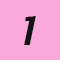
<style>
.page{position:relative;width:60px;height:60px;background:#f9aada}
.page>*{position:absolute;margin:0}
.t1{font:40px "LucidaSans-DemiItalic";color:#141314}
</style>
<div class="page">
<p class="t1" style="left:24px;top:16px;width:12px;height:29px">1</p>
</div>
